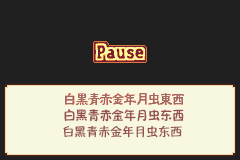
<style>
.page{position:relative;width:240px;height:160px;background:#202020}
.page>*{position:absolute;margin:0}
.t1{font:13px "FZSEK--GBK1-0";letter-spacing:-0.07em;color:#985050}
.t2{font:12px "HannotateSC-W5";color:#985050;font-weight:bold}
</style>
<div class="page">
<p class="t1" style="left:64px;top:109px;width:120px;height:13px">白黑青赤金年月虫东西</p>
<p class="t2" style="left:63px;top:125px;width:119px;height:13px">白黑青赤金年月虫东西</p>
</div>
